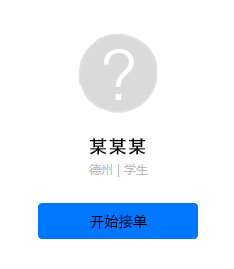
<style>
.page{position:relative;width:234px;height:269px;background:#ffffff}
.page>*{position:absolute;margin:0}
.t1{font:16.4px "MicrosoftYaHei";letter-spacing:0.159em;color:#000000;font-weight:bold}
.t2{font:15px "STXihei";letter-spacing:-0.045em;color:#000000}
</style>
<div class="page">
<p class="t1" style="left:89px;top:138px;width:57px;height:17px">某某某</p>
<p class="t2" style="left:90px;top:214px;width:57px;height:15px">开始接单</p>
</div>
